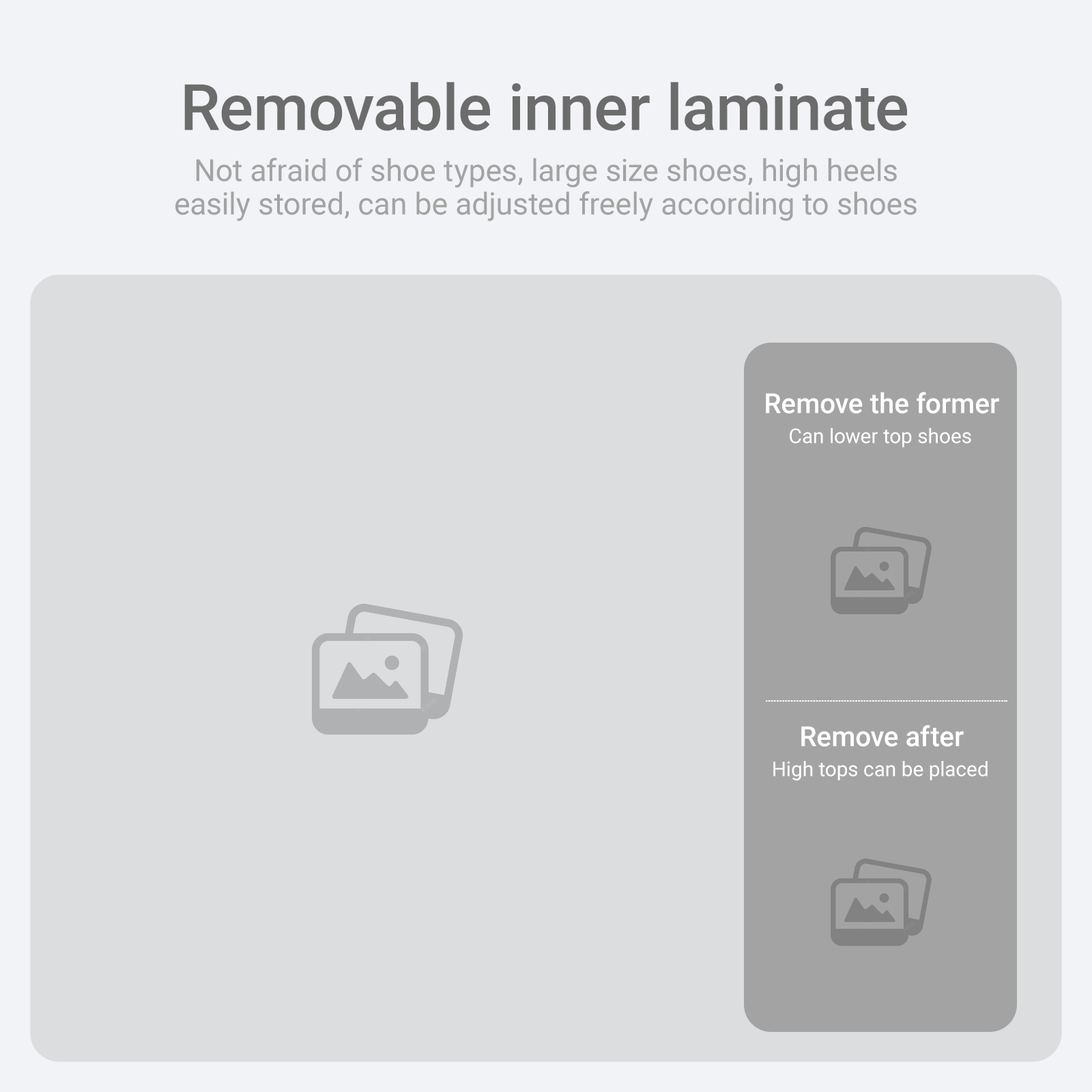
<style>
.page{position:relative;width:1092px;height:1092px;background:#dcdddf}
.page>*{position:absolute;margin:0}
.t1{font:64.1px "Roboto-Medium";color:#6c6c6c}
.t2{font:30.6px/33.5px "Roboto-Regular";color:#a3a3a3}
.t3{font:27.7px "Roboto-Medium";color:#ffffff}
.t4{font:20.4px "Roboto-Regular";color:#ffffff}
</style>
<div class="page">
<p class="t1" style="left:184px;top:82px;width:723px;height:49px">Removable inner laminate</p>
<p class="t2" style="left:175px;top:158px;width:742px;height:63px;text-align:center">Not afraid of shoe types, large size shoes, high heels<br>easily stored, can be adjusted freely according to shoes</p>
<p class="t3" style="left:766px;top:392px;width:233px;height:22px">Remove the former</p>
<p class="t4" style="left:790px;top:428px;width:181px;height:20px">Can lower top shoes</p>
<p class="t3" style="left:801px;top:725px;width:163px;height:22px">Remove after</p>
<p class="t4" style="left:773px;top:761px;width:215px;height:20px">High tops can be placed</p>
</div>
